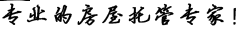
<style>
.page{position:relative;width:238px;height:30px;background:#ffffff}
.page>*{position:absolute;margin:0}
.t1{font:22.7px "FZYBXSJW--GB1-0";letter-spacing:0.1em;color:#010101;font-weight:bold}
</style>
<div class="page">
<p class="t1" style="left:2px;top:3px;width:234px;height:23px">专业的房屋托管专家！</p>
</div>
